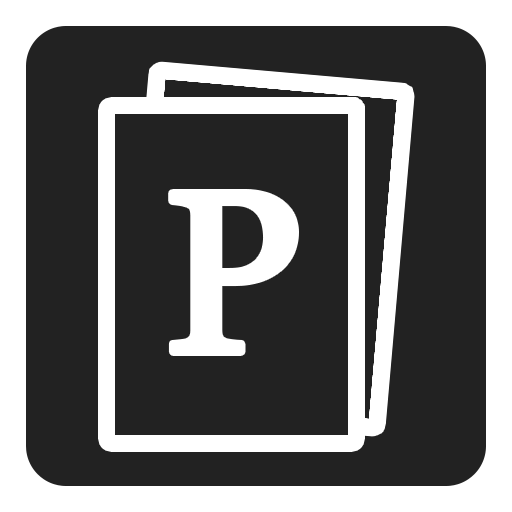
<style>
.page{position:relative;width:512px;height:512px;background:#222222}
.page>*{position:absolute;margin:0}
.t1{font:230px "Georgia";color:#ffffff}
</style>
<div class="page">
<p class="t1" style="left:172px;top:193px;width:123px;height:159px">P</p>
</div>
